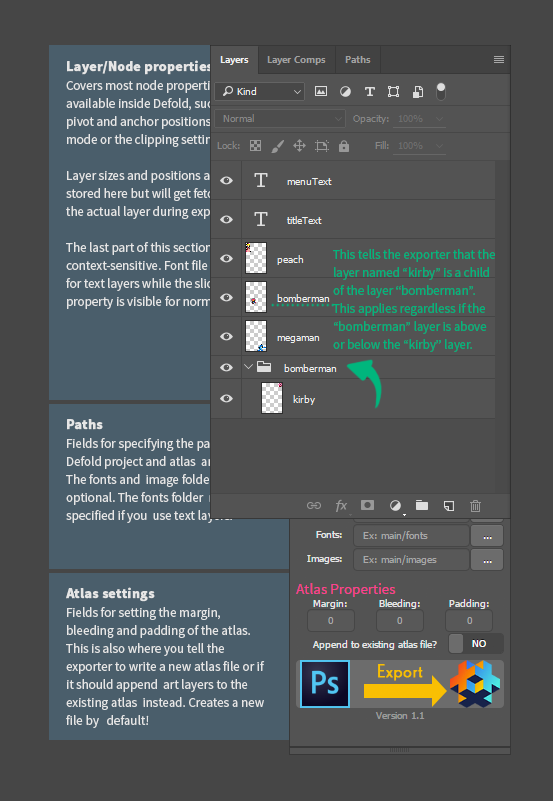
<style>
.page{position:relative;width:553px;height:801px;background:#464646}
.page>*{position:absolute;margin:0}
.t1{font:14px "SourceSansPro-Bold";color:#e6e6e6;font-weight:bold}
.t2{font:13px/18px "SourceSansPro-Regular";color:#e6e6e6}
.t3{font:13px/18px "SourceSansPro-Regular";color:#00b67d}
</style>
<div class="page">
<p class="t1" style="left:67px;top:60px;width:146px;height:15px">Layer/Node properties</p>
<p class="t2" style="left:66px;top:80px;width:202px;height:229px">Covers most node properties available inside Defold, such as the pivot and anchor positions, the blend mode or the clipping settings.<br><br>Layer sizes and positions are not stored here but will get fetched from the actual layer during export.<br><br>The last part of this section is context-sensitive. Font file is set here for text layers while the slice9 property is visible for normal layers.</p>
<p class="t3" style="left:333px;top:249px;width:162px;height:103px">This tells the exporter that the<br>layer named “kirby” is a child<br>of the layer “bomberman”.<br>This applies regardless if the <br>“bomberman” layer is above<br>or below the “kirby” layer.</p>
<p class="t1" style="left:67px;top:419px;width:36px;height:11px">Paths</p>
<p class="t2" style="left:66px;top:438px;width:206px;height:85px">Fields for specifying the paths to the Defold project and atlas  and GUI files. The fonts and  image folder paths are  optional. The fonts folder  needs to be specified if you  use text layers.</p>
<p class="t1" style="left:66px;top:587px;width:89px;height:15px">Atlas settings</p>
<p class="t2" style="left:66px;top:607px;width:199px;height:121px">Fields for setting the margin,  bleeding and padding of the atlas. This is also where you tell the exporter to write a new atlas file or if it should append  art layers to the existing atlas  instead. Creates a new file by   default!</p>
</div>
